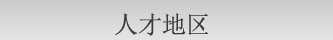
<style>
.page{position:relative;width:333px;height:40px}
.page>*{position:absolute;margin:0}
.t1{font:24px "SimSun";color:#3b3b3b}
</style>
<div class="page">
<p class="t1" style="left:115px;top:13px;width:93px;height:23px">人才地区</p>
</div>
